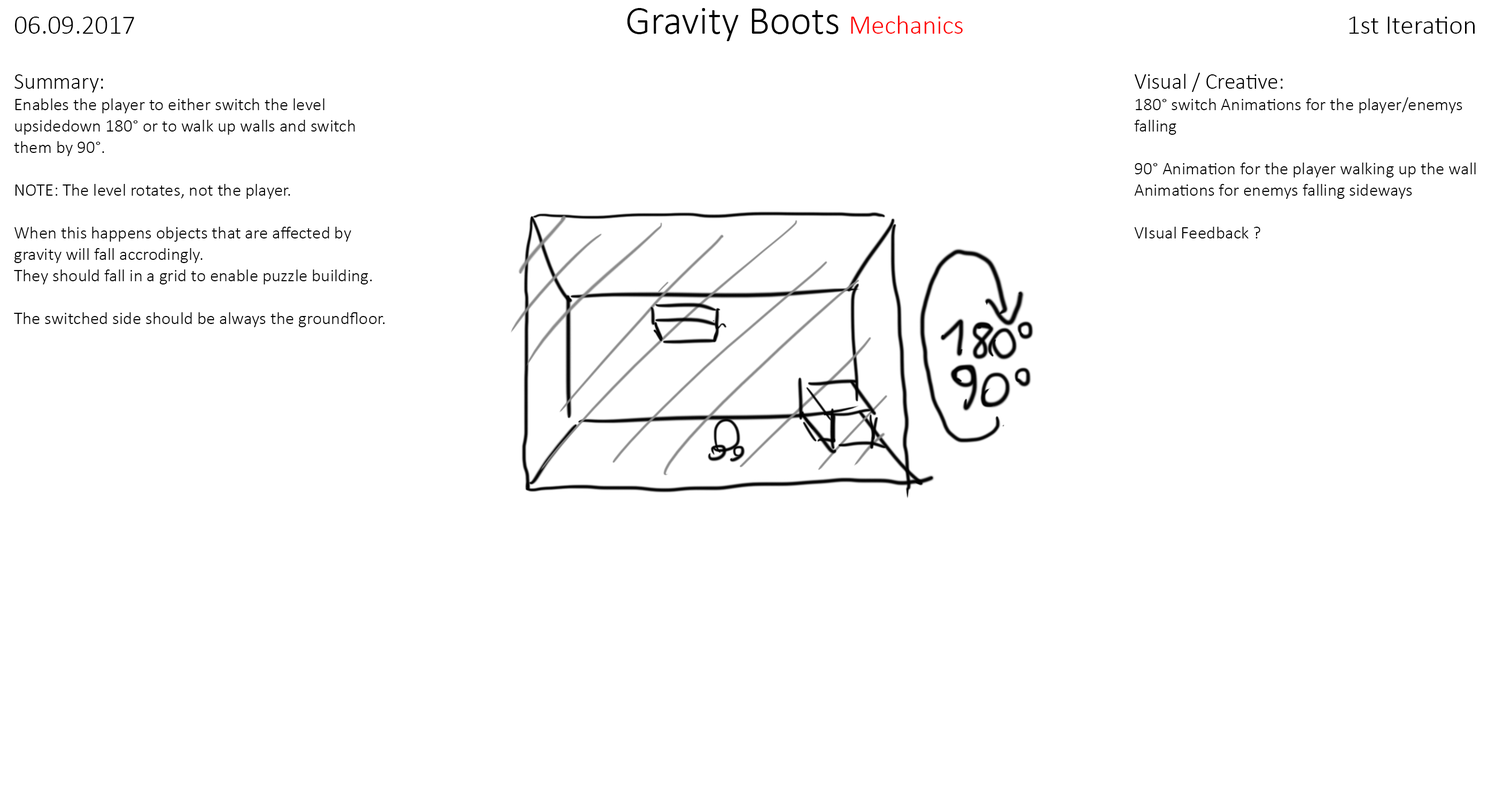
<style>
.page{position:relative;width:1488px;height:802px;background:#ffffff}
.page>*{position:absolute;margin:0}
.t1{font:26.7px "Calibri-Light";color:#000000}
.t2{font:40.1px "Calibri-Light";color:#000000}
.t3{font:26.7px "Calibri-Light";color:#ff0000}
.t4{font:17.8px "Calibri-Light";color:#000000}
.t5{font:22.3px "Calibri-Light";color:#000000}
</style>
<div class="page">
<p class="t1" style="left:15px;top:17px;width:119px;height:17px">06.09.2017</p>
<p class="t2" style="left:627px;top:8px;width:211px;height:33px">Gravity Boots</p>
<p class="t3" style="left:851px;top:15px;width:111px;height:19px">Mechanics</p>
<p class="t1" style="left:1349px;top:17px;width:125px;height:17px">1st Iteration</p>
<p class="t4" style="left:14px;top:74px;width:371px;height:253px"><span class="t5">Summary:<br></span>Enables the player to either switch the level upsidedown 180° or to walk up walls and switch them by 90°. <br><br>NOTE: The level rotates, not the player.<br><br>When this happens objects that are affected by gravity will fall accrodingly.<br>They should fall in a grid to enable puzzle building.<br><br>The switched side should be always the groundfloor.</p>
<p class="t4" style="left:1134px;top:73px;width:341px;height:165px"><span class="t5">Visual / Creative:<br></span>180° switch Animations for the player/enemys falling<br><br>90° Animation for the player walking up the wall<br>Animations for enemys falling sideways<br><br>VIsual Feedback ?</p>
</div>
